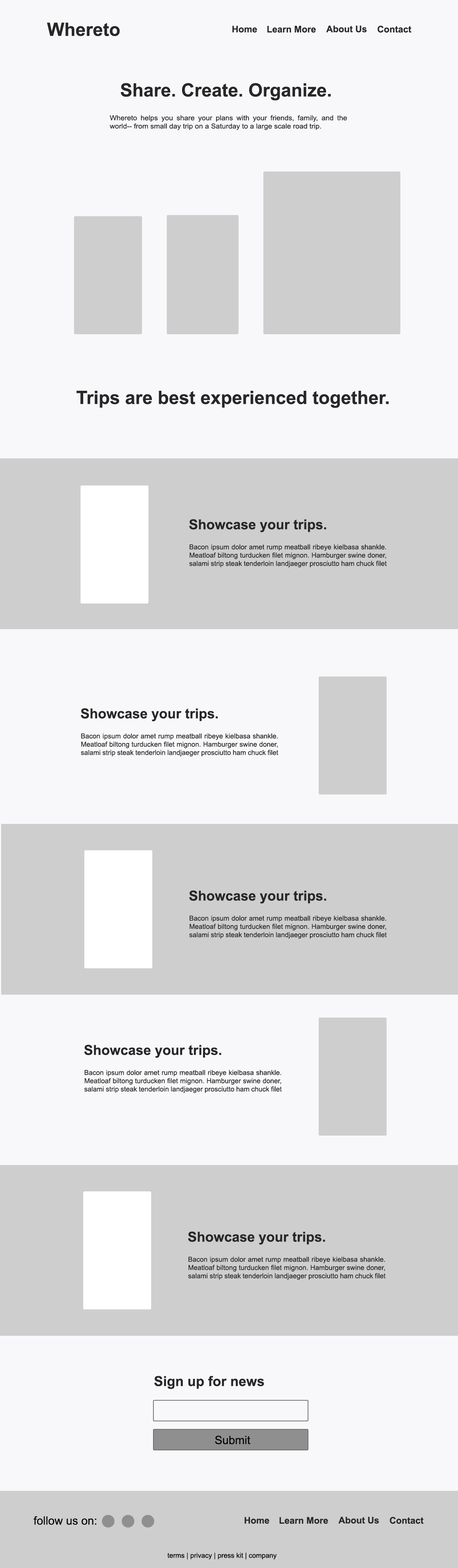
<style>
.page{position:relative;width:458px;height:1568px;background:#f8f8fa}
.page>*{position:absolute;margin:0}
.t1{font:18.3px "Arial-BoldMT";color:#282727}
.t2{font:9.2px "Arial-BoldMT";color:#282727}
.t3{font:6.9px "ArialMT";color:#282727;scale:1.05 1}
.t4{font:13.8px "Arial-BoldMT";color:#282727}
.t5{font:6.9px "ArialMT";color:#282727}
.t6{font:11.5px "ArialMT";color:#000000}
.t7{font:6.9px "ArialMT";color:#000000}
</style>
<div class="page">
<p class="t1" style="left:47px;top:23px;width:73px;height:13px">Whereto</p>
<p class="t2" style="left:233px;top:26px;width:24px;height:6px">Home</p>
<p class="t2" style="left:267px;top:26px;width:49px;height:7px">Learn More</p>
<p class="t2" style="left:326px;top:26px;width:41px;height:6px">About Us</p>
<p class="t2" style="left:378px;top:26px;width:34px;height:7px">Contact</p>
<p class="t1" style="left:121px;top:83px;width:210px;height:17px">Share. Create. Organize.</p>
<p class="t3" style="left:110px;top:115px;width:237px;height:15px;text-align:justify">Whereto helps you share your plans with your friends, family, and the world-- from small day trip on a Saturday to a large scale road trip.</p>
<p class="t1" style="left:76px;top:391px;width:313px;height:17px">Trips are best experienced together.</p>
<p class="t4" style="left:189px;top:519px;width:138px;height:13px">Showcase your trips.</p>
<p class="t5" style="left:189px;top:544px;width:198px;height:24px;text-align:justify">Bacon ipsum dolor amet rump meatball ribeye kielbasa shankle. Meatloaf biltong turducken filet mignon. Hamburger swine doner, salami strip steak tenderloin landjaeger prosciutto ham chuck filet mignon alcatra turkey sirloin jerky. Tenderloin ribeye beef kevin hamburger doner.</p>
<p class="t4" style="left:81px;top:708px;width:137px;height:14px">Showcase your trips.</p>
<p class="t5" style="left:81px;top:733px;width:197px;height:24px;text-align:justify">Bacon ipsum dolor amet rump meatball ribeye kielbasa shankle. Meatloaf biltong turducken filet mignon. Hamburger swine doner, salami strip steak tenderloin landjaeger prosciutto ham chuck filet mignon alcatra turkey sirloin jerky. Tenderloin ribeye beef kevin hamburger doner.</p>
<p class="t4" style="left:189px;top:890px;width:138px;height:14px">Showcase your trips.</p>
<p class="t5" style="left:189px;top:916px;width:198px;height:23px;text-align:justify">Bacon ipsum dolor amet rump meatball ribeye kielbasa shankle. Meatloaf biltong turducken filet mignon. Hamburger swine doner, salami strip steak tenderloin landjaeger prosciutto ham chuck filet mignon alcatra turkey sirloin jerky. Tenderloin ribeye beef kevin hamburger doner.</p>
<p class="t4" style="left:84px;top:1045px;width:138px;height:13px">Showcase your trips.</p>
<p class="t5" style="left:84px;top:1070px;width:198px;height:23px;text-align:justify">Bacon ipsum dolor amet rump meatball ribeye kielbasa shankle. Meatloaf biltong turducken filet mignon. Hamburger swine doner, salami strip steak tenderloin landjaeger prosciutto ham chuck filet mignon alcatra turkey sirloin jerky. Tenderloin ribeye beef kevin hamburger doner.</p>
<p class="t4" style="left:188px;top:1231px;width:137px;height:14px">Showcase your trips.</p>
<p class="t5" style="left:188px;top:1257px;width:198px;height:23px;text-align:justify">Bacon ipsum dolor amet rump meatball ribeye kielbasa shankle. Meatloaf biltong turducken filet mignon. Hamburger swine doner, salami strip steak tenderloin landjaeger prosciutto ham chuck filet mignon alcatra turkey sirloin jerky. Tenderloin ribeye beef kevin hamburger doner.</p>
<p class="t4" style="left:154px;top:1376px;width:110px;height:13px">Sign up for news</p>
<p class="t6" style="left:215px;top:1435px;width:36px;height:9px">Submit</p>
<p class="t6" style="left:34px;top:1516px;width:63px;height:9px">follow us on:</p>
<p class="t2" style="left:245px;top:1517px;width:25px;height:7px">Home</p>
<p class="t2" style="left:280px;top:1517px;width:48px;height:7px">Learn More</p>
<p class="t2" style="left:338px;top:1517px;width:41px;height:7px">About Us</p>
<p class="t2" style="left:390px;top:1517px;width:34px;height:7px">Contact</p>
<p class="t7" style="left:168px;top:1553px;width:109px;height:7px">terms | privacy | press kit | company</p>
</div>
